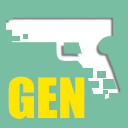
<style>
.page{position:relative;width:128px;height:128px;background:#78bea2}
.page>*{position:absolute;margin:0}
.t1{font:51.3px "Impact";color:#ffe500}
</style>
<div class="page">
<p class="t1" style="left:8px;top:76px;width:77px;height:43px">GEN</p>
</div>
